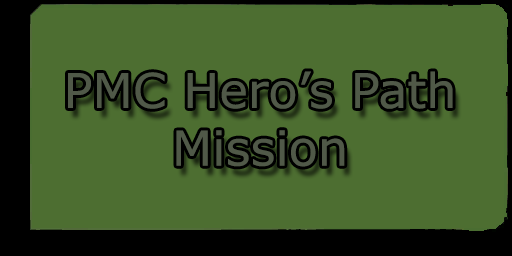
<style>
.page{position:relative;width:512px;height:256px;background:#4d6e31}
.page>*{position:absolute;margin:0}
.t1{font:48px "Verdana";color:#505948}
</style>
<div class="page">
<p class="t1" style="left:68px;top:71px;width:385px;height:96px;text-align:center">PMC Hero’s Path<br>Mission</p>
</div>
